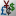
<style>
.page{position:relative;width:16px;height:16px}
.page>*{position:absolute;margin:0}
.t1{font:13px "Inconsolata";color:#03447b}
.t2{font:13px "Inconsolata";color:#641111}
.t3{font:12px "Inconsolata";color:#252526}
.t4{font:12px "Inconsolata";color:#1f6411}
</style>
<div class="page">
<p class="t1" style="left:0px;top:6px;width:7px;height:9px">£</p>
<p class="t2" style="left:3px;top:0px;width:7px;height:9px">¥</p>
<p class="t3" style="left:6px;top:6px;width:6px;height:10px">¢</p>
<p class="t4" style="left:9px;top:2px;width:6px;height:10px">$</p>
</div>
